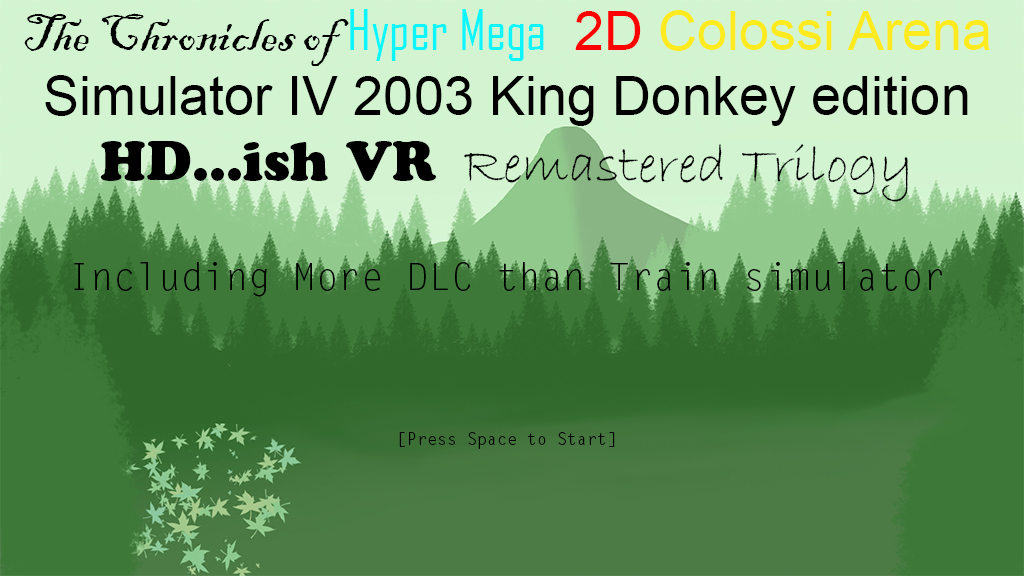
<style>
.page{position:relative;width:1024px;height:576px}
.page>*{position:absolute;margin:0}
.t1{font:37.5px "LetterGothicStd";color:#000000}
.t2{font:54.2px "BlackadderITC-Regular";color:#000000}
.t3{font:54.2px "AgencyFB-Reg";color:#0cf6ff}
.t4{font:54.2px "ArialMT";color:#ff0000}
.t5{font:54.2px "ArialMT";color:#fdeb20}
.t6{font:54.2px "ArialMT";color:#000000}
.t7{font:54.2px "CooperBlackStd";color:#000000}
.t8{font:54.2px "BradleyHandITC";color:#000000}
.t9{font:16.7px "LetterGothicStd";color:#000000}
</style>
<div class="page">
<p class="t1" style="left:24px;top:9px;width:966px;height:440px;text-align:center"><span class="t2">The Chronicles of </span><span class="t3">Hyper Mega </span><span class="t4">2D </span><span class="t5">Colossi Arena</span><span class="t6"> Simulator IV 2003 King Donkey edition<br></span><span class="t7">HD...ish VR </span><span class="t8">Remastered Trilogy <br><br></span>Including More DLC than Train simulator<br><br><br><br><span class="t9">[Press Space to Start]</span></p>
</div>
